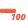
<style>
.page{position:relative;width:28px;height:21px;background:#ffffff}
.page>*{position:absolute;margin:0}
.t1{font:8.6px "MyriadPro-BoldIt";color:#fe5544}
</style>
<div class="page">
<p class="t1" style="left:12px;top:14px;width:14px;height:6px">100</p>
</div>
